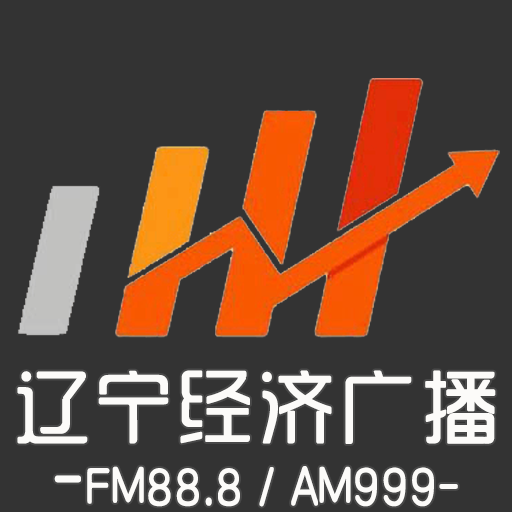
<style>
.page{position:relative;width:512px;height:512px;background:#333333}
.page>*{position:absolute;margin:0}
.t1{font:50px/75px "SJyuantijian-C-Regular";letter-spacing:0.02em;color:#fcfbf9;scale:0.85 1}
.t2{font:80px/75px "SJyunlvyuan";letter-spacing:0.02em;color:#fcfbf9}
.t3{font:72px/75px "SJyuantijian-C-Regular";letter-spacing:0.02em;color:#fcfbf9;scale:0.85 1}
</style>
<div class="page">
<p class="t1" style="left:17px;top:370px;width:479px;height:137px;text-align:center"><span class="t2">辽宁经济广播</span><span class="t3">-</span>FM88.8 / AM999-</p>
</div>
